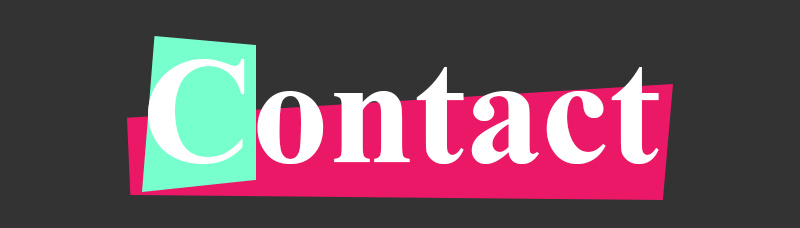
<style>
.page{position:relative;width:800px;height:228px;background:#333333}
.page>*{position:absolute;margin:0}
.t1{font:153px "TimesNewRomanPS-BoldMT";color:#ffffff}
</style>
<div class="page">
<p class="t1" style="left:148px;top:59px;width:511px;height:105px">Contact</p>
</div>
